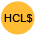
<style>
.page{position:relative;width:35px;height:35px;background:#ffbc34}
.page>*{position:absolute;margin:0}
.t1{font:11.2px "ArialMT";color:#000000}
</style>
<div class="page">
<p class="t1" style="left:4px;top:14px;width:29px;height:9px">HCL$</p>
</div>
